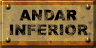
<style>
.page{position:relative;width:96px;height:48px}
.page>*{position:absolute;margin:0}
.t1{font:14.7px/14.7px "Arial-Black";letter-spacing:0.005em;text-transform:uppercase}
</style>
<div class="page">
<p class="t1" style="left:9px;top:9px;width:80px;height:27px;text-align:center">ANDAR<br>inferior</p>
</div>
